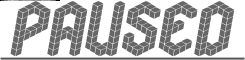
<style>
.page{position:relative;width:245px;height:60px;background:#ffffff}
.page>*{position:absolute;margin:0}
.t1{font:100px "soma";color:#666666;font-style:italic}
</style>
<div class="page">
<p class="t1" style="left:10px;top:1px;width:225px;height:55px">PAUSED</p>
</div>
